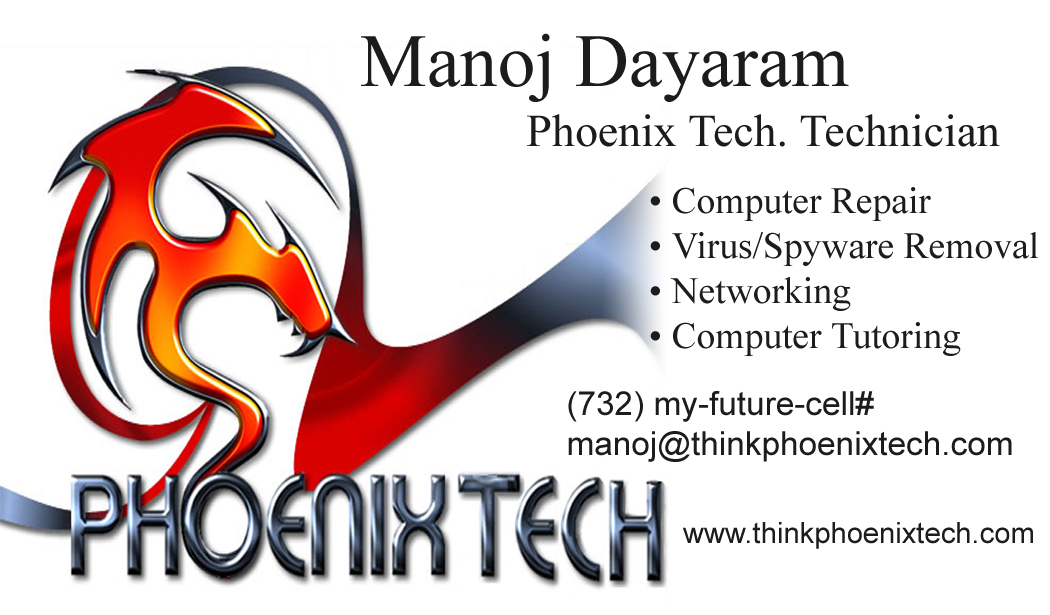
<style>
.page{position:relative;width:1050px;height:615px;background:#ffffff}
.page>*{position:absolute;margin:0}
.t1{font:75px "TimesNewRomanPSMT";color:#1c1b1d}
.t2{font:45.8px "TimesNewRomanPSMT";color:#1c1b1d}
.t3{font:37.5px "TimesNewRomanPSMT";color:#1c1b1d}
.t4{font:33.3px "ArialMT";color:#1c1b1d}
.t5{font:29.2px "ArialMT";color:#1c1b1d}
</style>
<div class="page">
<p class="t1" style="left:361px;top:33px;width:488px;height:69px">Manoj Dayaram</p>
<p class="t2" style="left:527px;top:114px;width:473px;height:33px">Phoenix Tech. Technician</p>
<p class="t3" style="left:650px;top:187px;width:388px;height:169px">• Computer Repair<br>• Virus/Spyware Removal<br>• Networking<br>• Computer Tutoring</p>
<p class="t4" style="left:568px;top:391px;width:444px;height:71px">(732) my-future-cell#<br>manoj@thinkphoenixtech.com</p>
<p class="t5" style="left:683px;top:522px;width:350px;height:27px">www.thinkphoenixtech.com</p>
</div>
